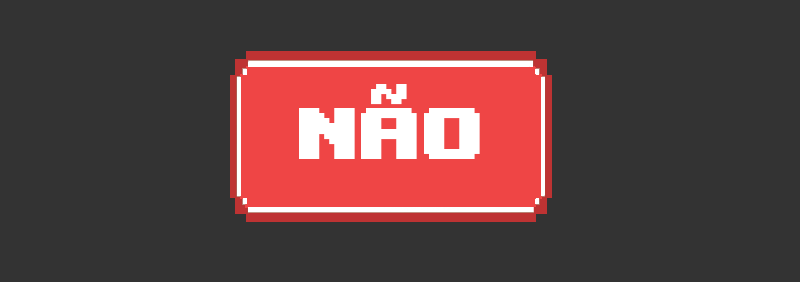
<style>
.page{position:relative;width:800px;height:282px;background:#333333}
.page>*{position:absolute;margin:0}
.t1{font:100px "UpheavalTT-BRK-";letter-spacing:0.02em;color:#ffffff}
</style>
<div class="page">
<p class="t1" style="left:299px;top:84px;width:181px;height:75px">não</p>
</div>
